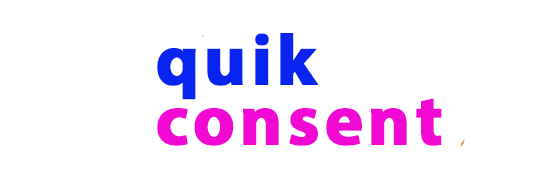
<style>
.page{position:relative;width:539px;height:180px;background:#ffffff}
.page>*{position:absolute;margin:0}
.t1{font:72px/30px "MyriadPro-Bold";letter-spacing:0.05em;color:#f109d3;font-weight:bold}
.t2{font:72px/30px "MyriadPro-Bold";letter-spacing:0.05em;color:#0924f1;font-weight:bold}
</style>
<div class="page">
<p class="t1" style="left:157px;top:33px;width:285px;height:113px"><span class="t2">quik<br><br></span>consent</p>
</div>
